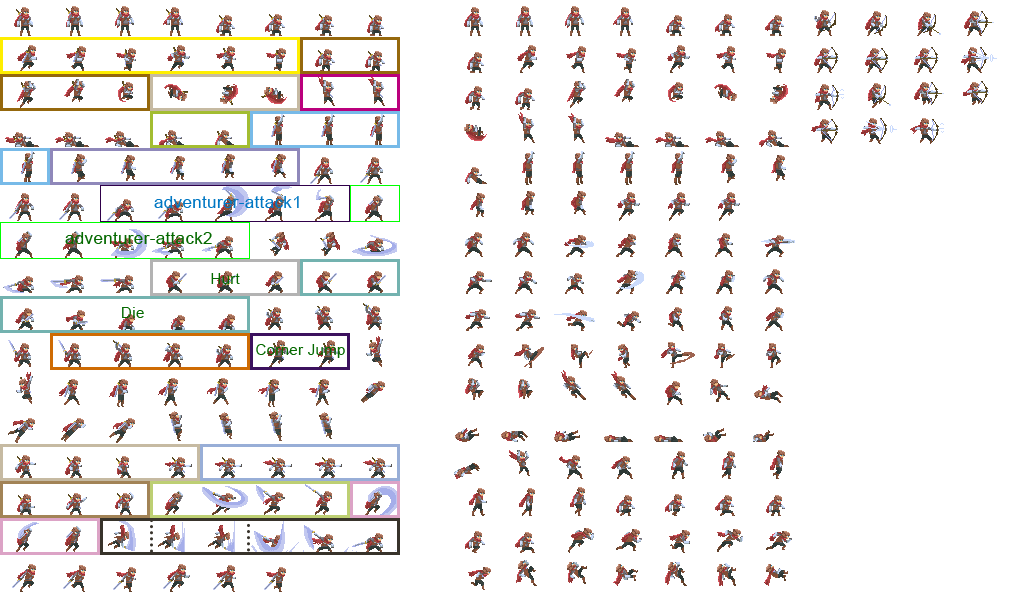
<style>
.page{position:relative;width:1024px;height:592px;background:#ffffff}
.page>*{position:absolute;margin:0}
.t1{font:17px "ArialMT";letter-spacing:0.02em;color:#0077c3}
.t2{font:17px "ArialMT";letter-spacing:0.02em;color:#056900}
.t3{font:15px "ArialMT";letter-spacing:0.02em;color:#056900}
</style>
<div class="page">
<p class="t1" style="left:154px;top:196px;width:145px;height:12px">adventurer-attack1</p>
<p class="t2" style="left:65px;top:232px;width:147px;height:12px">adventurer-attack2</p>
<p class="t3" style="left:211px;top:273px;width:29px;height:11px">Hurt</p>
<p class="t3" style="left:122px;top:307px;width:22px;height:11px">Die</p>
<p class="t3" style="left:256px;top:344px;width:89px;height:14px">Corner Jump</p>
</div>
